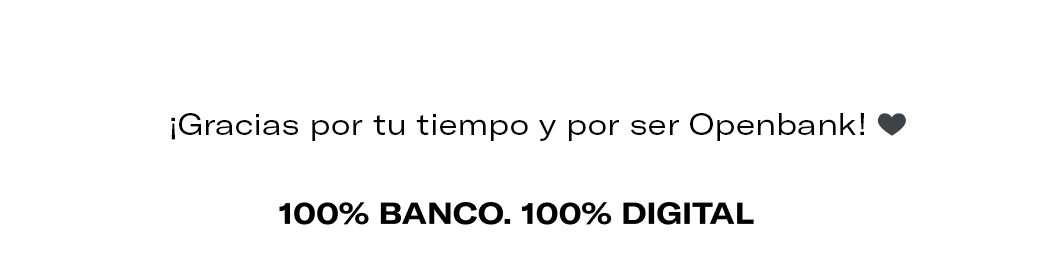
<style>
.page{position:relative;width:1050px;height:266px;background:#ffffff}
.page>*{position:absolute;margin:0}
.t1{font:30px "GTAmerica-ExtendedRegular";color:#000000}
.t2{font:30px "EmojiOneColor";color:#000000}
</style>
<div class="page">
<p class="t1" style="left:171px;top:113px;width:735px;height:28px">¡Gracias por tu tiempo y por ser Openbank! <span class="t2">🖤</span></p>
</div>
